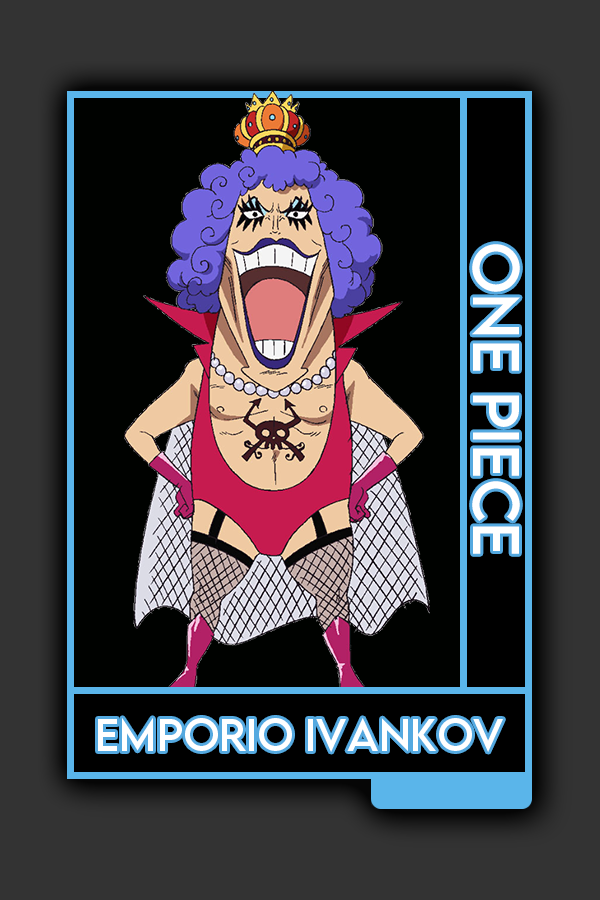
<style>
.page{position:relative;width:600px;height:900px;background:#333333}
.page>*{position:absolute;margin:0}
.t1{font:58.4px "LEMONMILK-Regular";color:#ffffff}
.t2{font:40.6px "LEMONMILK-Regular";color:#ffffff}
</style>
<div class="page">
<p class="t1" style="left:472px;top:244px;width:48px;height:310px;rotate:90deg">One Piece</p>
<p class="t2" style="left:98px;top:718px;width:405px;height:34px">Emporio Ivankov</p>
</div>
